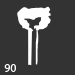
<style>
.page{position:relative;width:75px;height:75px;background:#333333}
.page>*{position:absolute;margin:0}
.t1{font:12px "MyriadPro-Regular";color:#ffffff}
</style>
<div class="page">
<p class="t1" style="left:4px;top:64px;width:12px;height:8px">90</p>
</div>
